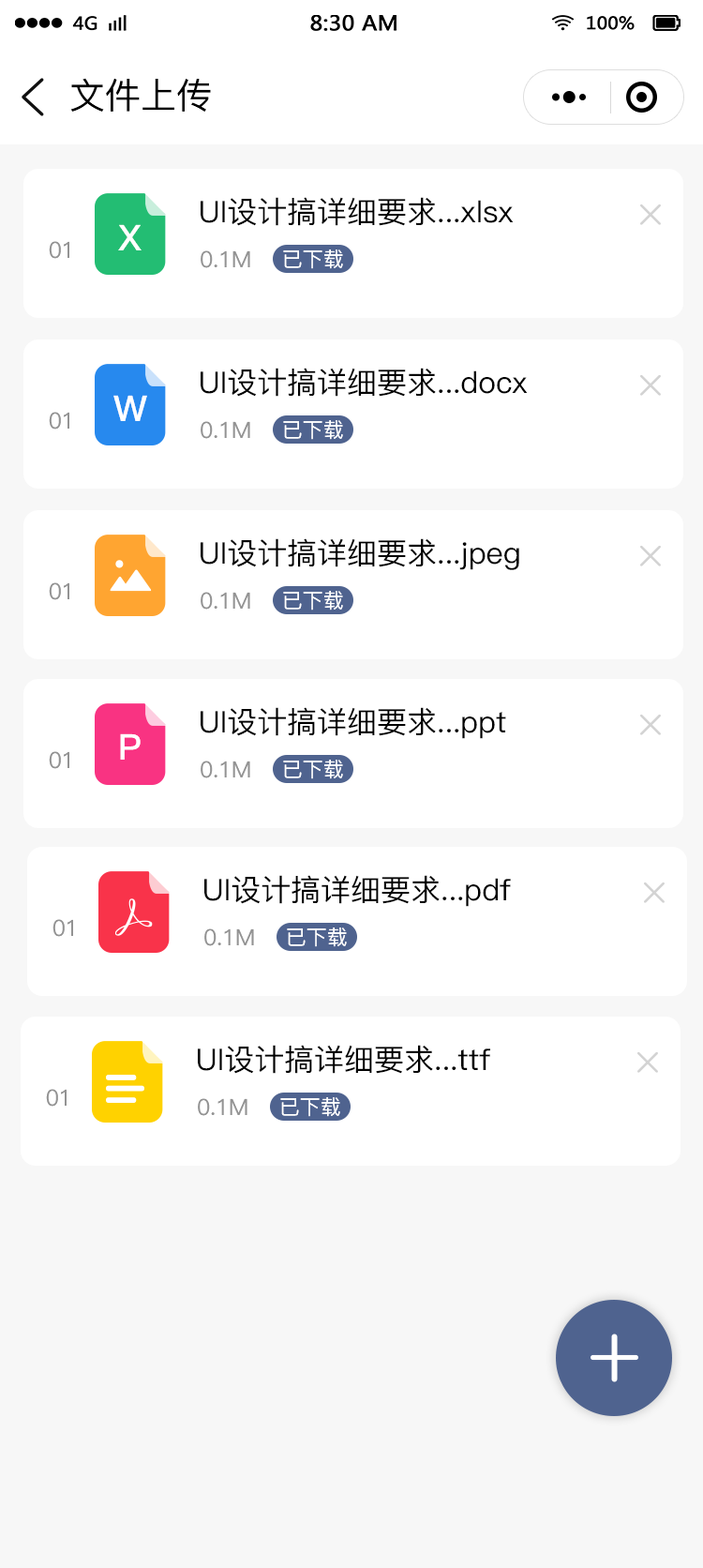
<style>
.page{position:relative;width:703px;height:1568px;background:#ffffff}
.page>*{position:absolute;margin:0}
.t1{font:35.6px "PingFang-SC-Medium";color:#000000}
.t2{font:30px "PingFang-SC-Medium";color:#000000}
.t3{font:35.6px "PingFang-SC-Bold";color:#ffffff}
.t4{font:22.5px "PingFang-SC-Medium";color:#939393}
.t5{font:20.6px "PingFang-SC-Medium";color:#ffffff}
</style>
<div class="page">
<p class="t1" style="left:70px;top:78px;width:141px;height:34px">文件上传</p>
<p class="t2" style="left:201px;top:197px;width:313px;height:29px">UI设计搞详细要求...xlsx</p>
<p class="t3" style="left:118px;top:224px;width:24px;height:26px">X</p>
<p class="t4" style="left:49px;top:241px;width:20px;height:18px">01</p>
<p class="t4" style="left:201px;top:250px;width:49px;height:18px">0.1M</p>
<p class="t5" style="left:283px;top:249px;width:60px;height:20px">已下载</p>
<p class="t2" style="left:201px;top:368px;width:327px;height:29px">UI设计搞详细要求...docx</p>
<p class="t3" style="left:113px;top:395px;width:34px;height:26px">W</p>
<p class="t4" style="left:49px;top:412px;width:20px;height:18px">01</p>
<p class="t4" style="left:201px;top:421px;width:49px;height:18px">0.1M</p>
<p class="t5" style="left:283px;top:420px;width:60px;height:20px">已下载</p>
<p class="t2" style="left:201px;top:538px;width:319px;height:32px">UI设计搞详细要求...jpeg</p>
<p class="t4" style="left:49px;top:582px;width:20px;height:18px">01</p>
<p class="t4" style="left:201px;top:592px;width:49px;height:18px">0.1M</p>
<p class="t5" style="left:283px;top:591px;width:60px;height:20px">已下载</p>
<p class="t2" style="left:201px;top:707px;width:305px;height:32px">UI设计搞详细要求...ppt</p>
<p class="t3" style="left:120px;top:733px;width:21px;height:27px">P</p>
<p class="t4" style="left:49px;top:751px;width:20px;height:18px">01</p>
<p class="t4" style="left:201px;top:761px;width:49px;height:17px">0.1M</p>
<p class="t5" style="left:283px;top:760px;width:60px;height:19px">已下载</p>
<p class="t2" style="left:204px;top:875px;width:307px;height:32px">UI设计搞详细要求...pdf</p>
<p class="t4" style="left:53px;top:919px;width:20px;height:18px">01</p>
<p class="t4" style="left:204px;top:928px;width:50px;height:18px">0.1M</p>
<p class="t5" style="left:287px;top:927px;width:60px;height:20px">已下载</p>
<p class="t2" style="left:198px;top:1045px;width:292px;height:29px">UI设计搞详细要求...ttf</p>
<p class="t4" style="left:46px;top:1089px;width:21px;height:18px">01</p>
<p class="t5" style="left:280px;top:1097px;width:60px;height:20px">已下载</p>
<p class="t4" style="left:198px;top:1098px;width:50px;height:18px">0.1M</p>
</div>
